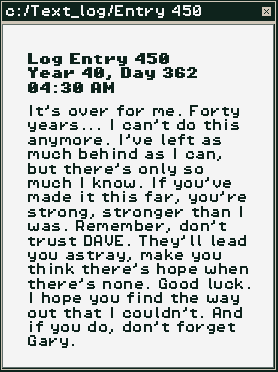
<style>
.page{position:relative;width:278px;height:372px;background:#f4f4f4}
.page>*{position:absolute;margin:0}
.t1{font:12px "PixelOperator8";color:#f4f4f4}
.t2{font:12px "PixelOperator8-Bold";color:#0e231c}
.t3{font:12px "PixelOperator8";color:#0e231c}
</style>
<div class="page">
<p class="t1" style="left:6px;top:5px;width:195px;height:13px">c:/Text_log/Entry 450</p>
<p class="t2" style="left:28px;top:53px;width:169px;height:40px">Log Entry 450<br>Year 40, Day 362<br>04:30 AM</p>
<p class="t3" style="left:28px;top:105px;width:222px;height:243px">It’s over for me. Forty years... I can’t do this anymore. I’ve left as much behind as I can, but there’s only so much I know. If you’ve made it this far, you’re strong, stronger than I was. Remember, don’t trust DAVE. They’ll lead you astray, make you think there’s hope when there’s none. Good luck. I hope you find the way out that I couldn’t. And if you do, don’t forget Gary.</p>
</div>
